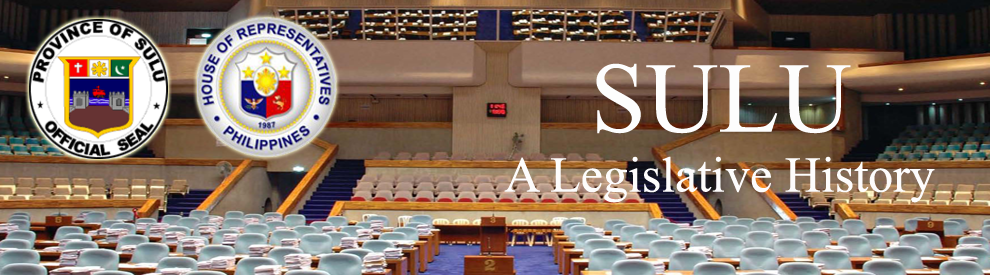
<style>
.page{position:relative;width:990px;height:275px}
.page>*{position:absolute;margin:0}
.t1{font:50px "TimesNewRomanPSMT";color:#fdfcfc}
.t2{font:100px "TimesNewRomanPSMT";color:#fdfdfd}
</style>
<div class="page">
<p class="t1" style="left:504px;top:63px;width:431px;height:140px;text-align:center"><span class="t2">SULU<br></span>A Legislative History</p>
</div>
